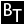
<style>
.page{position:relative;width:25px;height:25px;background:#000000}
.page>*{position:absolute;margin:0}
.t1{font:18px "MyriadPro-Regular";color:#ffffff}
</style>
<div class="page">
<p class="t1" style="left:4px;top:3px;width:8px;height:13px">B</p>
<p class="t1" style="left:12px;top:9px;width:10px;height:13px">T</p>
</div>
